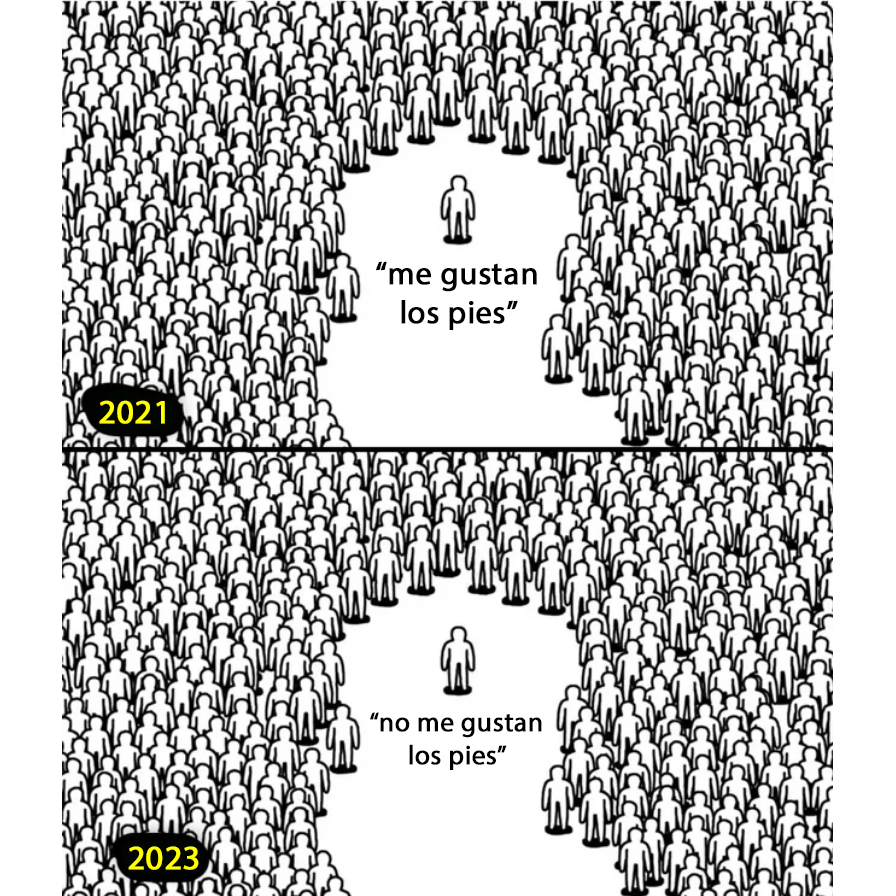
<style>
.page{position:relative;width:896px;height:896px;background:#ffffff}
.page>*{position:absolute;margin:0}
.t1{font:32.5px "MyriadPro-Regular";color:#000000;font-weight:bold}
.t2{font:33.8px "MyriadPro-Regular";color:#ffff00;font-weight:bold}
.t3{font:27.2px "MyriadPro-Regular";color:#000000;font-weight:bold}
.t4{font:34.1px "MyriadPro-Regular";color:#ffff00;font-weight:bold}
</style>
<div class="page">
<p class="t1" style="left:376px;top:261px;width:161px;height:69px;text-align:center">“me gustan<br>los pies”</p>
<p class="t2" style="left:99px;top:400px;width:66px;height:24px">2021</p>
<p class="t3" style="left:370px;top:712px;width:172px;height:58px;text-align:center">“no me gustan<br>los pies”</p>
<p class="t4" style="left:128px;top:846px;width:71px;height:24px">2023</p>
</div>
